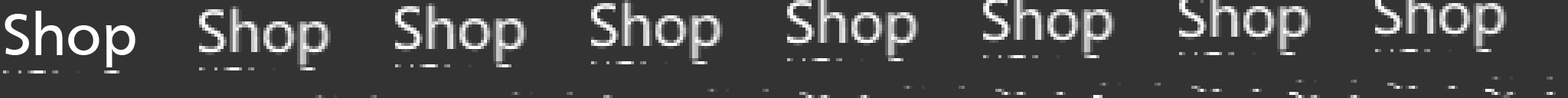
<style>
.page{position:relative;width:1568px;height:98px;background:#333333}
.page>*{position:absolute;margin:0}
.t1{font:61.6px "Frutiger";color:#ffffff}
</style>
<div class="page">
<p class="t1" style="left:5px;top:11px;width:131px;height:56px">Shop</p>
</div>
